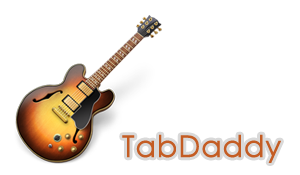
<style>
.page{position:relative;width:300px;height:175px;background:#ffffff}
.page>*{position:absolute;margin:0}
.t1{font:30px "CenturyGothic";color:#c45c23;font-weight:bold}
</style>
<div class="page">
<p class="t1" style="left:122px;top:134px;width:159px;height:29px">TabDaddy</p>
</div>
